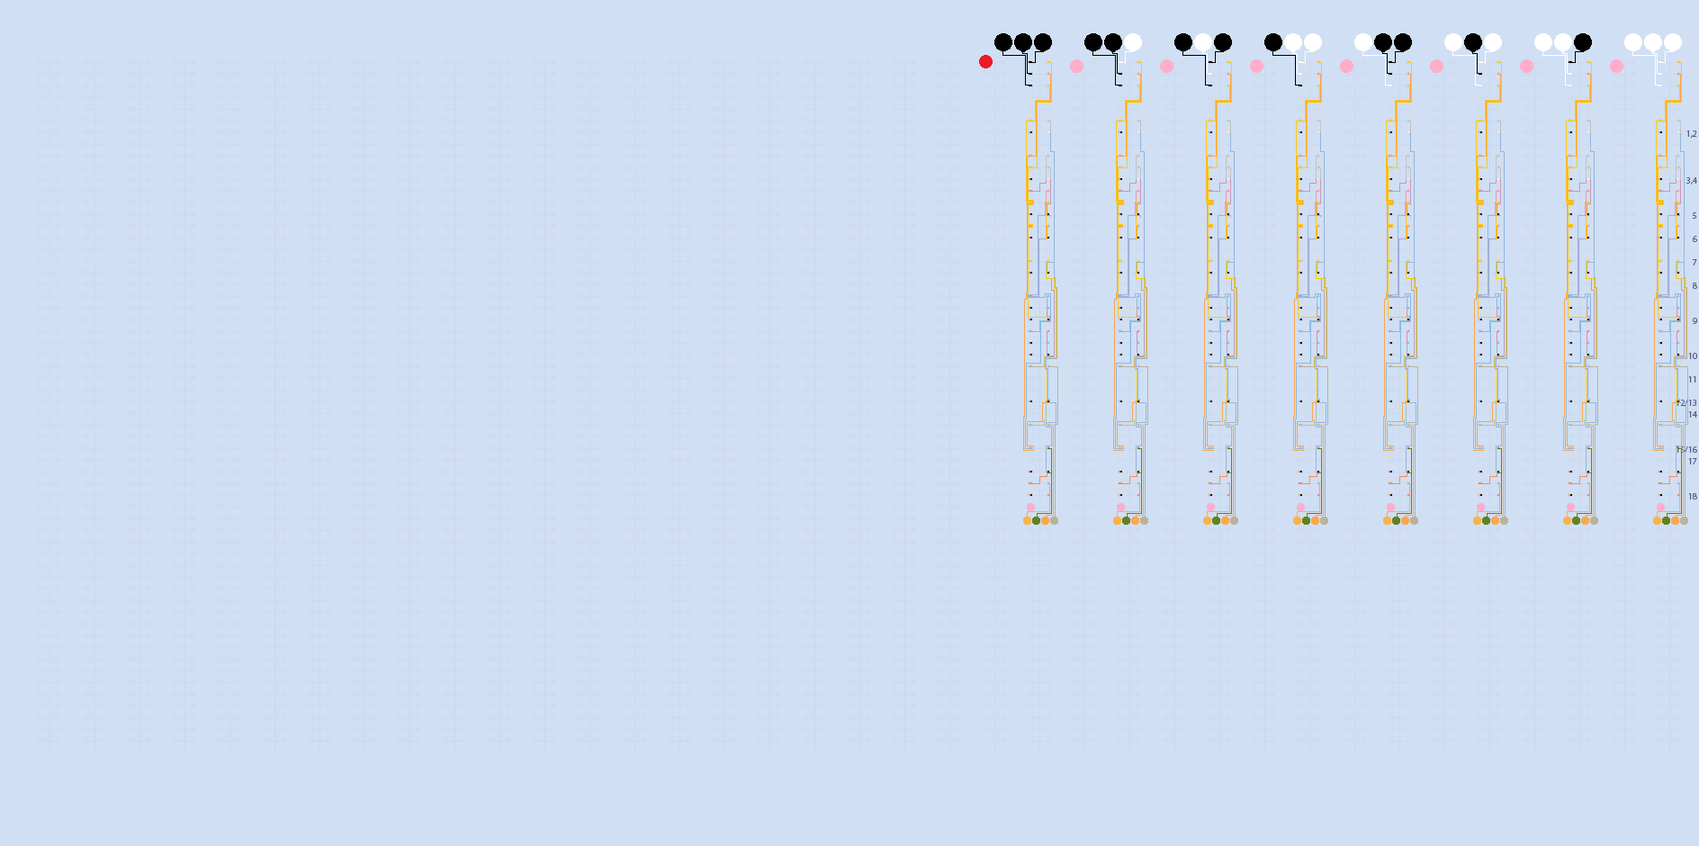
<style>
.page{position:relative;width:1699px;height:846px;background:#d0dff3}
.page>*{position:absolute;margin:0}
.t1{font:9px/11.7px "MyriadPro-Regular";color:#585a89}
</style>
<div class="page">
<p class="t1" style="left:1676px;top:130px;width:21px;height:370px;text-align:right">1,2<br><br><br><br>3,4<br><br><br>5<br><br>6<br><br>7<br><br>8<br><br><br>9<br><br><br>10<br><br>11<br><br>12/13<br>14<br><br><br>15/16<br>17<br><br><br>18</p>
</div>
